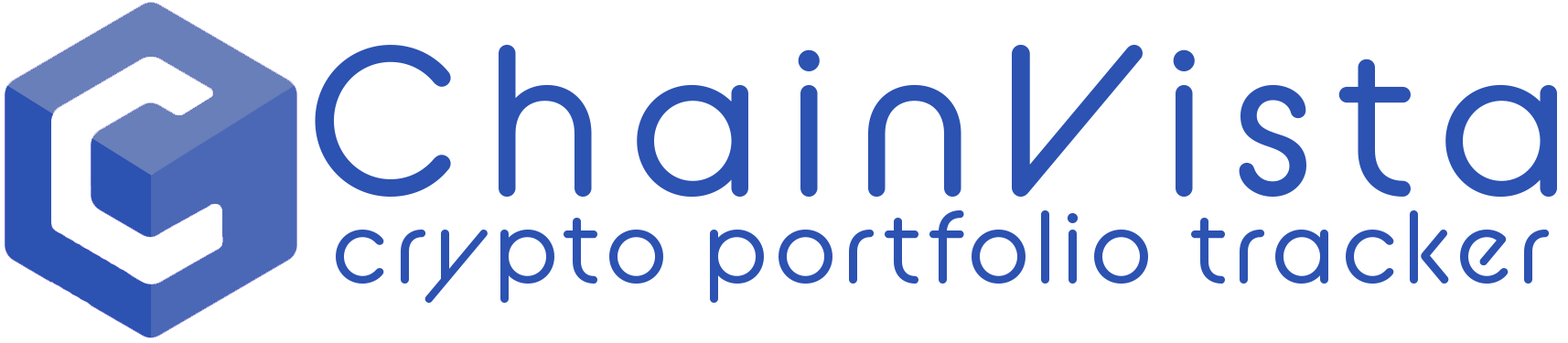
<style>
.page{position:relative;width:1568px;height:343px;background:#ffffff}
.page>*{position:absolute;margin:0}
.t1{font:211.9px "BCAlphapipeRB-Regular";letter-spacing:0.105em;color:#2c52b2}
.t2{font:101.6px "BCAlphapipeRB-Regular";letter-spacing:0.055em;color:#2c52b2}
</style>
<div class="page">
<p class="t1" style="left:315px;top:45px;width:1242px;height:153px">ChainVista</p>
<p class="t2" style="left:336px;top:210px;width:1214px;height:93px">crypto portfolio tracker</p>
</div>
